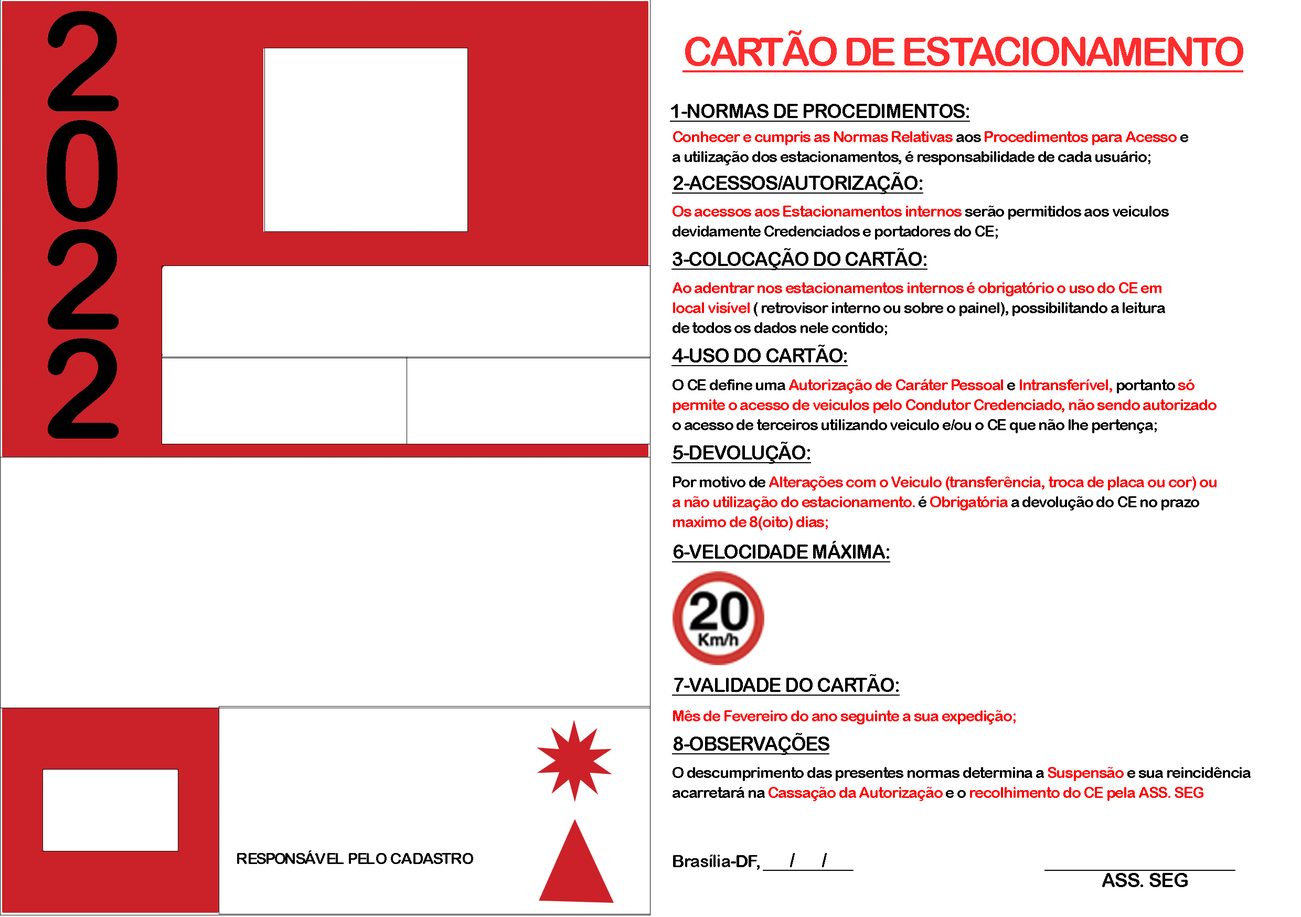
<style>
.page{position:relative;width:1301px;height:917px;background:#ffffff}
.page>*{position:absolute;margin:0}
.t1{font:138.8px/109.1px "ArialRoundedMTBold";letter-spacing:-0.06em;color:#000100}
.t2{font:39.2px "ArialRoundedMTBold";letter-spacing:-0.06em;color:#ff2d2d;text-decoration:underline}
.t3{font:19.7px "ArialRoundedMTBold";letter-spacing:-0.06em;color:#000000;text-decoration:underline}
.t4{font:15.3px/19.8px "ArialRoundedMTBold";letter-spacing:-0.04em;color:#000000}
.t5{font:15.3px/19.8px "ArialRoundedMTBold";letter-spacing:-0.06em;color:#ff0000}
.t6{font:15.3px/19.8px "ArialRoundedMTBold";letter-spacing:-0.04em;color:#ff0000}
.t7{font:15.3px "ArialRoundedMTBold";letter-spacing:-0.04em;color:#ff0000}
.t8{font:15.3px "ArialRoundedMTBold";letter-spacing:-0.04em;color:#000100}
.t9{font:15.3px "ArialRoundedMTBold";letter-spacing:-0.018em;color:#000100}
.t10{font:17.5px "ArialRoundedMTBold";letter-spacing:-0.04em;color:#000000}
.t11{font:19.7px "ArialRoundedMTBold";letter-spacing:-0.04em;color:#000000;text-decoration:underline}
.t12{font:19.7px "ArialRoundedMTBold";letter-spacing:-0.04em;color:#000000}
.t13{font:17.5px "ArialRoundedMTBold";letter-spacing:-0.04em;color:#000000;text-decoration:underline}
</style>
<div class="page">
<p class="t1" style="left:47px;top:11px;width:72px;height:427px;text-align:justify">2<br>0<br>2<br>2</p>
<p class="t2" style="left:682px;top:30px;width:561px;height:42px">CARTÃO DE ESTACIONAMENTO</p>
<p class="t3" style="left:670px;top:104px;width:300px;height:18px">1-NORMAS DE PROCEDIMENTOS:</p>
<p class="t4" style="left:672px;top:131px;width:516px;height:34px;text-align:justify"><span class="t5">C</span><span class="t6">onhecer e cumpris as Normas Relativas</span> aos <span class="t6">Procedimentos para Acesso</span> e<br>a utilização dos estacionamentos, é responsabilidade de cada usuário;</p>
<p class="t3" style="left:672px;top:172px;width:251px;height:22px">2-ACESSOS/AUTORIZAÇÃO:</p>
<p class="t4" style="left:672px;top:206px;width:497px;height:34px;text-align:justify"><span class="t6">Os acessos aos Estacionamentos internos</span> serão permitidos aos veiculos<br>devidamente Credenciados e portadores do CE;</p>
<p class="t3" style="left:671px;top:248px;width:256px;height:22px">3-COLOCAÇÃO DO CARTÃO:</p>
<p class="t4" style="left:672px;top:282px;width:493px;height:53px;text-align:justify"><span class="t6">Ao adentrar nos estacionamentos internos é obrigatório o uso do CE em<br>local visível </span>( retrovisor interno ou sobre o painel), possibilitando a leitura<br>de todos os dados nele contido;</p>
<p class="t3" style="left:671px;top:345px;width:177px;height:21px">4-USO DO CARTÃO:</p>
<p class="t6" style="left:672px;top:379px;width:544px;height:54px;text-align:justify"><span class="t4">O CE define uma</span> Autorização de Caráter Pessoal <span class="t4">e</span> Intransferível, <span class="t4">portanto</span> só<br>permite o acesso de veiculos pelo Condutor Credenciado, não sendo autorizado<br><span class="t4">o acesso de terceiros utilizando veiculo e/ou o CE que não lhe pertença;</span></p>
<p class="t3" style="left:671px;top:442px;width:140px;height:22px">5-DEVOLUÇÃO:</p>
<p class="t6" style="left:672px;top:476px;width:544px;height:54px;text-align:justify"><span class="t4">Por motivo de</span> Alterações com o Veiculo (transferência, troca de placa ou cor) ou<br>a não utilização do estacionamento. <span class="t4">é </span>Obrigatória <span class="t4">a devolução do CE no prazo<br></span>maximo de 8(oito) dias;</p>
<p class="t3" style="left:672px;top:541px;width:218px;height:21px">6-VELOCIDADE MÁXIMA:</p>
<p class="t3" style="left:672px;top:674px;width:227px;height:21px">7-VALIDADE DO CARTÃO:</p>
<p class="t7" style="left:673px;top:710px;width:342px;height:14px">Mês de Fevereiro do ano seguinte a sua expedição;</p>
<p class="t3" style="left:672px;top:733px;width:157px;height:22px">8-OBSERVAÇÕES</p>
<p class="t4" style="left:672px;top:767px;width:578px;height:34px;text-align:justify">O descumprimento das presentes normas determina a<span class="t6"> Suspensão </span>e sua reincidência<br>acarretará na<span class="t6"> Cassação da Autorização </span>e o<span class="t6"> recolhimento do CE pela ASS. SEG</span></p>
<p class="t8" style="left:237px;top:850px;width:236px;height:14px">RESPONSÁVE<span class="t9">L PELO CA</span>DASTRO</p>
<p class="t10" style="left:673px;top:853px;width:180px;height:18px">Brasília-DF, <span class="t11">      /      /</span></p>
<p class="t12" style="left:1044px;top:870px;width:191px;height:17px"><span class="t13">                                                 <br></span>   ASS. SEG</p>
</div>
